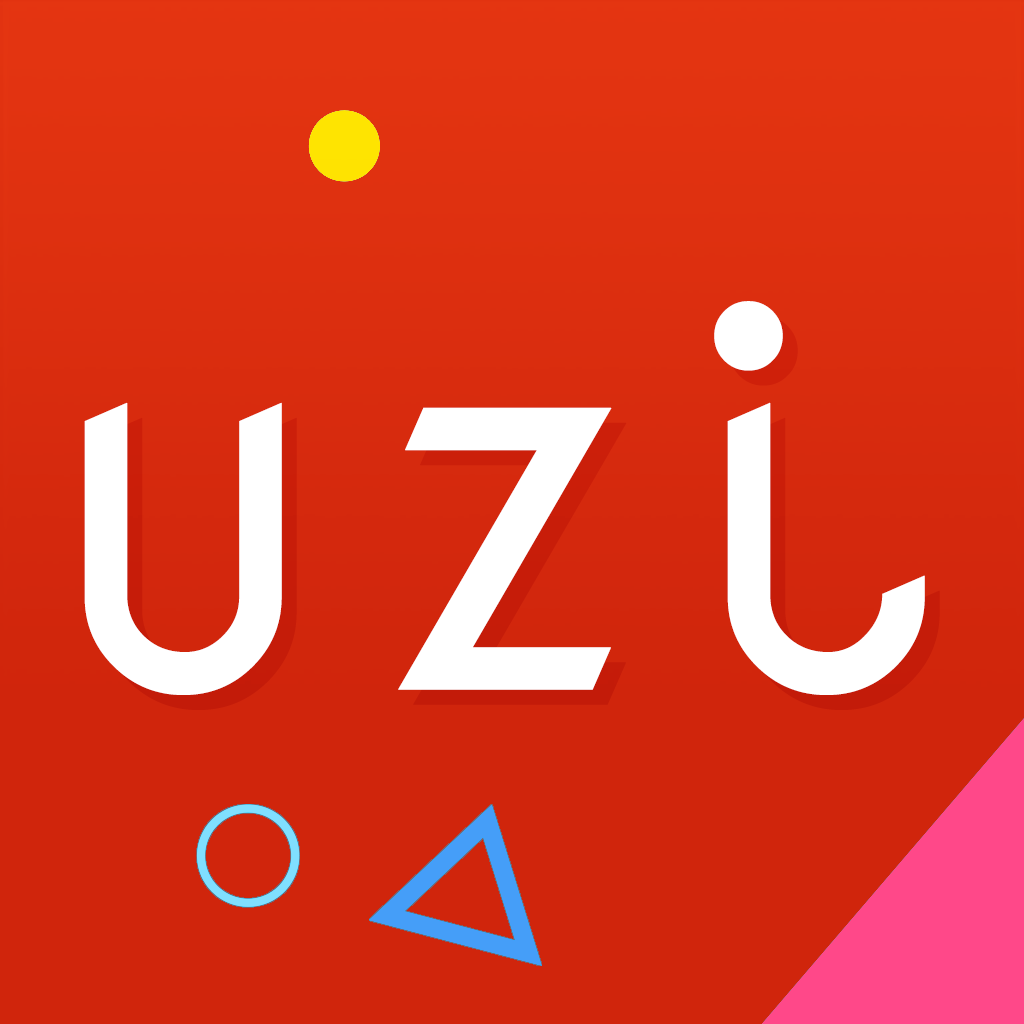
<style>
.page{position:relative;width:1024px;height:1024px;background:#d0250c}
.page>*{position:absolute;margin:0}
.t1{font:532.9px "NovaMono";letter-spacing:0.02em;color:#ffffff;font-weight:bold}
</style>
<div class="page">
<p class="t1" style="left:84px;top:301px;width:841px;height:394px">uzi</p>
</div>
